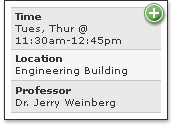
<style>
.page{position:relative;width:173px;height:125px;background:#e9e9e9}
.page>*{position:absolute;margin:0}
.t1{font:10px "Verdana";color:#333333}
.t2{font:10px "Verdana-Bold";color:#333333}
.t3{font:17px "Verdana-BoldItalic";color:#ffffff}
</style>
<div class="page">
<p class="t1" style="left:15px;top:13px;width:106px;height:33px"><span class="t2">Time<br></span>Tues, Thur @<br>11:30am-12:45pm</p>
<p class="t3" style="left:149px;top:8px;width:10px;height:10px">+</p>
<p class="t1" style="left:16px;top:55px;width:111px;height:21px"><span class="t2">Location</span><br>Engineering Building</p>
<p class="t1" style="left:16px;top:86px;width:99px;height:22px"><span class="t2">Professor<br></span>Dr. Jerry Weinberg</p>
</div>
